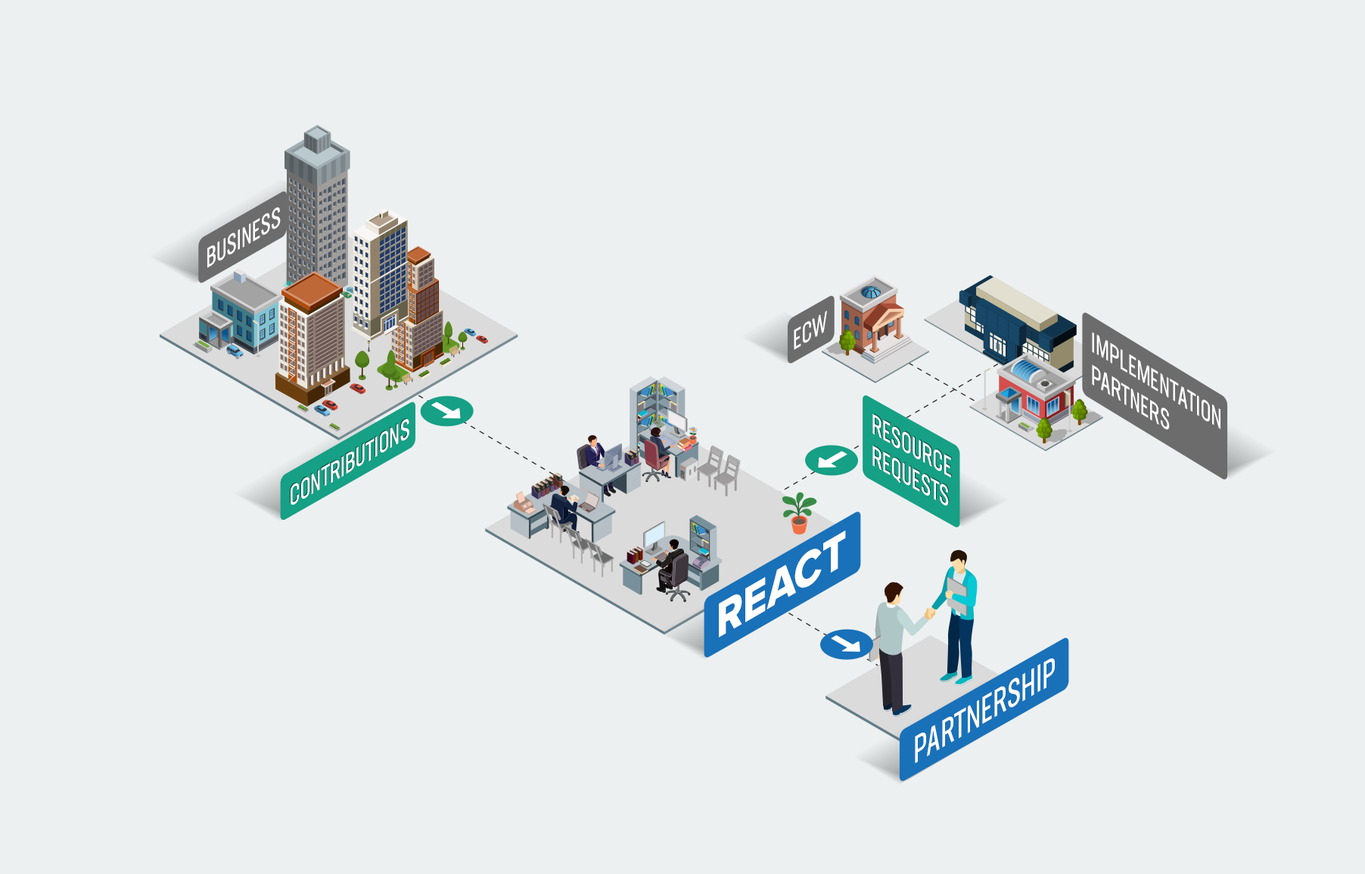
<style>
.page{position:relative;width:1365px;height:874px;background:#ecf0f1}
.page>*{position:absolute;margin:0}
.t1{font:27.7px "NeusaNextStd-CompactRegular";color:#ffffff;text-transform:uppercase;scale:0.93 1}
.t2{font:27.7px/32.8px "NeusaNextStd-CompactRegular";color:#ffffff;text-transform:uppercase;scale:0.94 1}
.t3{font:27.7px/31.5px "NeusaNextStd-CompactRegular";color:#ffffff;text-transform:uppercase;scale:0.92 1}
.t4{font:50.4px "ProximaNova-Extrabld";color:#ffffff;text-transform:uppercase;scale:0.93 1}
.t5{font:37.8px "NeusaNextStd-CompactRegular";color:#ffffff;text-transform:uppercase;scale:0.93 1}
</style>
<div class="page">
<p class="t1" style="left:207px;top:207px;width:74px;height:61px;rotate:-30deg">Business</p>
<p class="t1" style="left:794px;top:310px;width:33px;height:40px;rotate:-30deg">ECW</p>
<p class="t2" style="left:1092px;top:332px;width:128px;height:98px;rotate:31deg">Implementation<br>Partners</p>
<p class="t3" style="left:872px;top:414px;width:79px;height:91px;rotate:29deg">Resource<br>Requests</p>
<p class="t4" style="left:719px;top:530px;width:127px;height:108px;rotate:-30deg">REACT</p>
<p class="t5" style="left:915px;top:658px;width:140px;height:105px;rotate:-30deg">Partnership</p>
</div>
